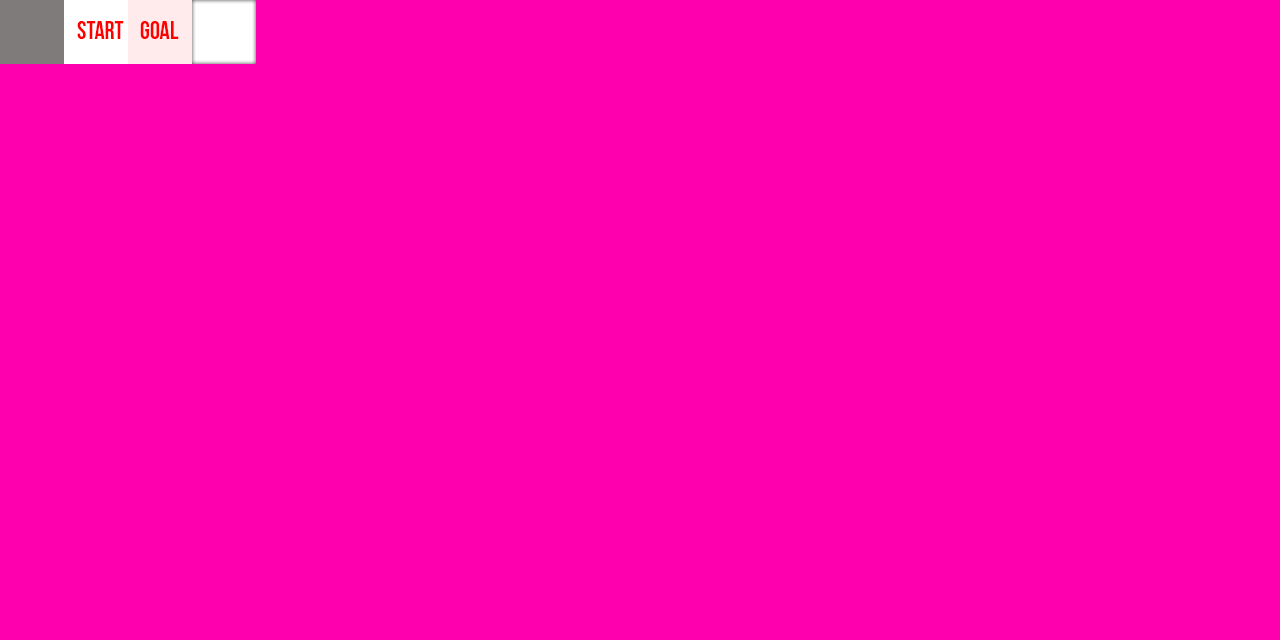
<style>
.page{position:relative;width:1280px;height:640px;background:#ff00ae}
.page>*{position:absolute;margin:0}
.t1{font:25px "BebasNeue-Bold";color:#ff0000}
</style>
<div class="page">
<p class="t1" style="left:77px;top:21px;width:47px;height:18px">Start</p>
<p class="t1" style="left:140px;top:21px;width:39px;height:18px">Goal</p>
</div>
